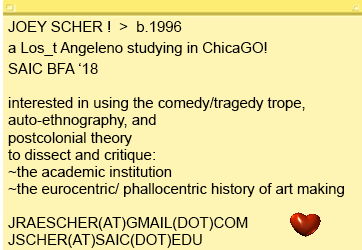
<style>
.page{position:relative;width:362px;height:250px;background:#fef5b4}
.page>*{position:absolute;margin:0}
.t1{font:14.7px/17.1px "ArialMT";color:#000000}
.t2{font:14.7px/21.1px "ArialMT";color:#000000}
</style>
<div class="page">
<p class="t1" style="left:8px;top:21px;width:336px;height:227px"><span class="t2">JOEY SCHER !  &gt;  b.1996 <br>a Los_t Angeleno studying in ChicaGO!<br>SAIC BFA ‘18<br></span><br>interested in using the comedy/tragedy trope, <br>auto-ethnography, and<br>postcolonial theory <br>to dissect and critique:<br>~the academic institution<br>~the eurocentric/ phallocentric history of art making<br><br>JRAESCHER(AT)GMAIL(DOT)COM<br>JSCHER(AT)SAIC(DOT)EDU</p>
</div>
